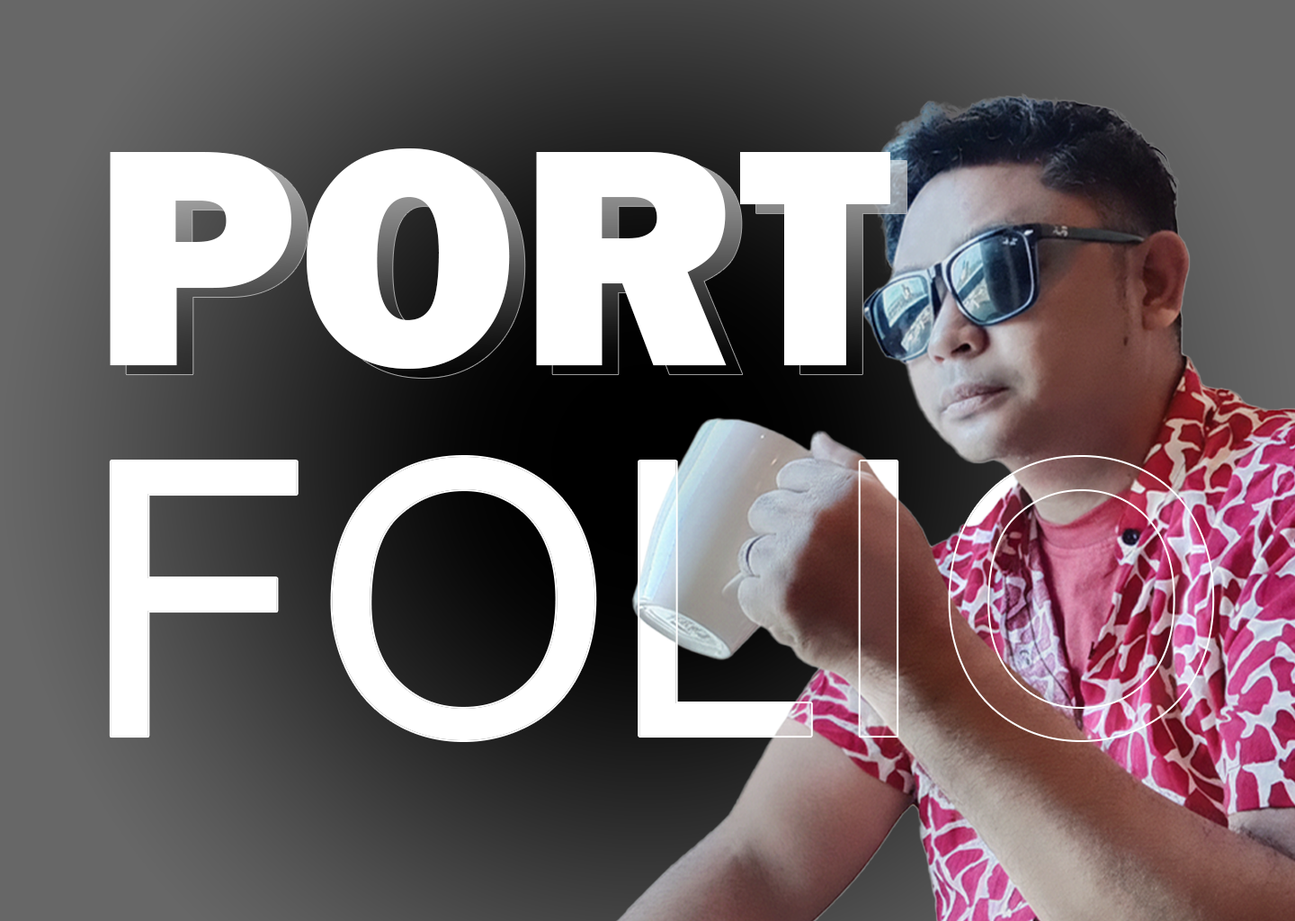
<style>
.page{position:relative;width:1295px;height:921px}
.page>*{position:absolute;margin:0}
.t1{font:320.6px "FranklinGothic-Heavy";color:#ffffff}
.t2{font:383.2px "ArialMT"}
</style>
<div class="page">
<p class="t1" style="left:110px;top:148px;width:780px;height:221px">PORT</p>
<p class="t1" style="left:126px;top:157px;width:780px;height:221px;opacity:0.48">PORT</p>
<p class="t2" style="left:111px;top:457px;width:1102px;height:283px">FOLIO</p>
<p class="t2" style="left:111px;top:457px;width:1102px;height:283px">FOLIO</p>
</div>
